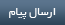
<style>
.page{position:relative;width:65px;height:25px}
.page>*{position:absolute;margin:0}
.t1{font:12px "BYekan";color:#ffffff}
</style>
<div class="page">
<p class="t1" style="left:9px;top:8px;width:47px;height:11px">ارسال پیام</p>
</div>
